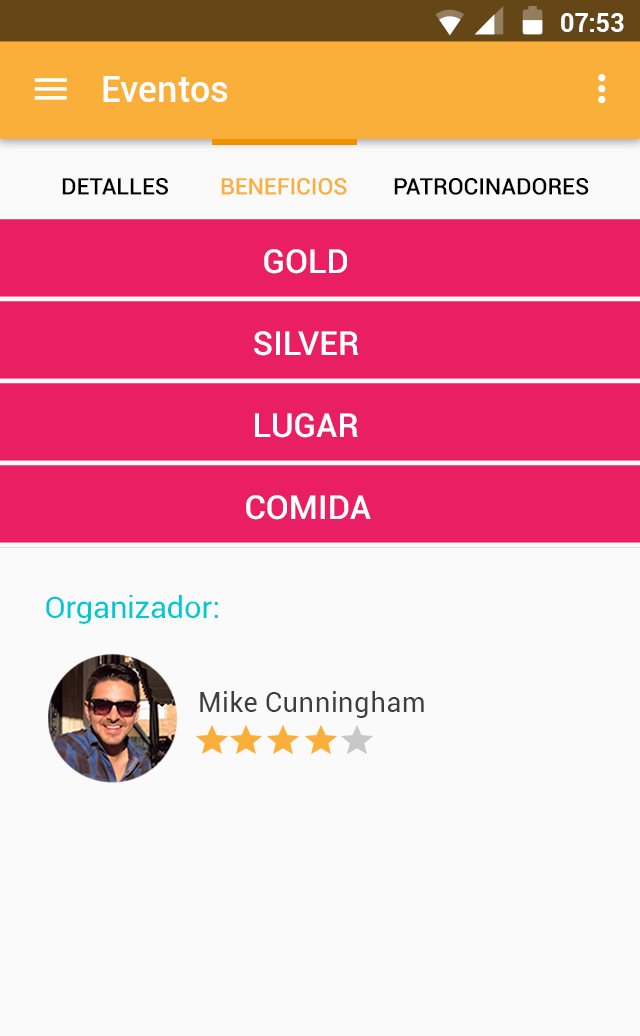
<style>
.page{position:relative;width:640px;height:1036px;background:#fafafa}
.page>*{position:absolute;margin:0}
.t1{font:24.9px "Roboto-Bold";color:#ffffff}
.t2{font:35.8px "Roboto-Medium";letter-spacing:0.005em;color:#ffffff}
.t3{font:22.9px "Roboto-Medium";color:#000000}
.t4{font:22.9px "Roboto-Medium";color:#faaf3a}
.t5{font:33.3px "Roboto-Medium";color:#ffffff}
.t6{font:30.5px "Roboto-Regular";letter-spacing:0.01em;color:#00c8d5}
.t7{font:26.7px "Roboto-Regular";letter-spacing:0.01em;color:#3f3f3f}
</style>
<div class="page">
<p class="t1" style="left:561px;top:13px;width:63px;height:19px">07:53</p>
<p class="t2" style="left:103px;top:76px;width:125px;height:26px">Eventos</p>
<p class="t3" style="left:62px;top:178px;width:106px;height:17px">DETALLES</p>
<p class="t4" style="left:221px;top:178px;width:126px;height:17px">BENEFICIOS</p>
<p class="t3" style="left:394px;top:178px;width:195px;height:17px">PATROCINADORES</p>
<p class="t5" style="left:264px;top:249px;width:83px;height:25px">GOLD</p>
<p class="t5" style="left:254px;top:331px;width:105px;height:25px">SILVER</p>
<p class="t5" style="left:255px;top:413px;width:103px;height:25px">LUGAR</p>
<p class="t5" style="left:246px;top:495px;width:125px;height:25px">COMIDA</p>
<p class="t6" style="left:46px;top:595px;width:172px;height:29px">Organizador:</p>
<p class="t7" style="left:200px;top:691px;width:224px;height:27px">Mike Cunningham</p>
</div>
